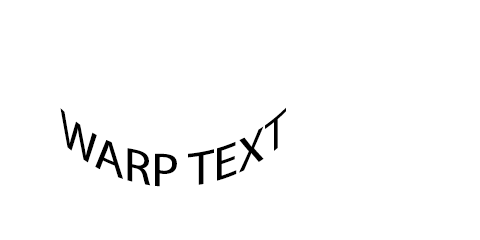
<style>
.page{position:relative;width:480px;height:240px;background:#ffffff}
.page>*{position:absolute;margin:0}
.t1{font:48px "MyriadPro-Regular";color:#000000}
</style>
<div class="page">
<p class="t1" style="left:60px;top:107px;width:226px;height:80px">WARP TEXT</p>
</div>
